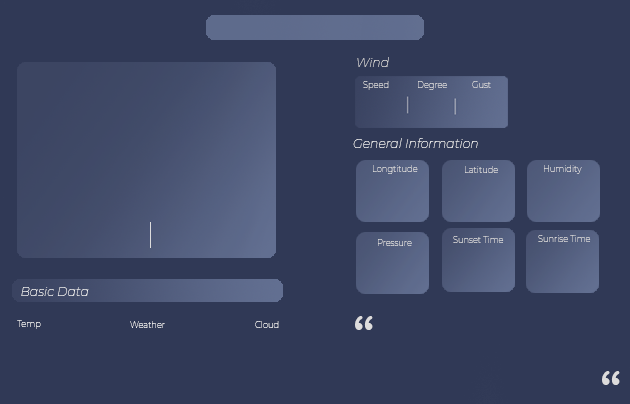
<style>
.page{position:relative;width:630px;height:404px;background:#303956}
.page>*{position:absolute;margin:0}
.t1{font:12.5px "Montserrat-ThinItalic";color:#dddcdc}
.t2{font:8.3px "Montserrat-Thin"}
.t3{font:8.3px "Montserrat-Thin";color:#dddcdc}
.t4{font:12.5px "Montserrat-ThinItalic";color:#f3f3f3}
.t5{font:45.8px "ArialRoundedMTBold";color:#dddcdc}
.t6{font:8.3px "Montserrat-Thin";color:#f3f3f3}
</style>
<div class="page">
<p class="t1" style="left:357px;top:57px;width:32px;height:10px">Wind</p>
<p class="t2" style="left:363px;top:81px;width:26px;height:9px">Speed</p>
<p class="t3" style="left:418px;top:81px;width:29px;height:9px">Degree</p>
<p class="t3" style="left:472px;top:81px;width:19px;height:7px">Gust</p>
<p class="t4" style="left:353px;top:138px;width:125px;height:10px">General Information</p>
<p class="t3" style="left:373px;top:165px;width:45px;height:9px">Longtitude</p>
<p class="t3" style="left:465px;top:166px;width:33px;height:7px">Latitude</p>
<p class="t3" style="left:544px;top:165px;width:38px;height:9px">Humidity</p>
<p class="t3" style="left:378px;top:239px;width:34px;height:7px">Pressure</p>
<p class="t3" style="left:453px;top:236px;width:51px;height:7px">Sunset Time</p>
<p class="t3" style="left:538px;top:235px;width:53px;height:7px">Sunrise Time</p>
<p class="t4" style="left:21px;top:287px;width:68px;height:9px">Basic Data</p>
<p class="t5" style="left:355px;top:316px;width:18px;height:14px">“</p>
<p class="t2" style="left:17px;top:320px;width:24px;height:9px">Temp</p>
<p class="t6" style="left:130px;top:321px;width:35px;height:7px">Weather</p>
<p class="t2" style="left:255px;top:321px;width:24px;height:7px">Cloud</p>
<p class="t5" style="left:602px;top:371px;width:18px;height:14px">“</p>
</div>
